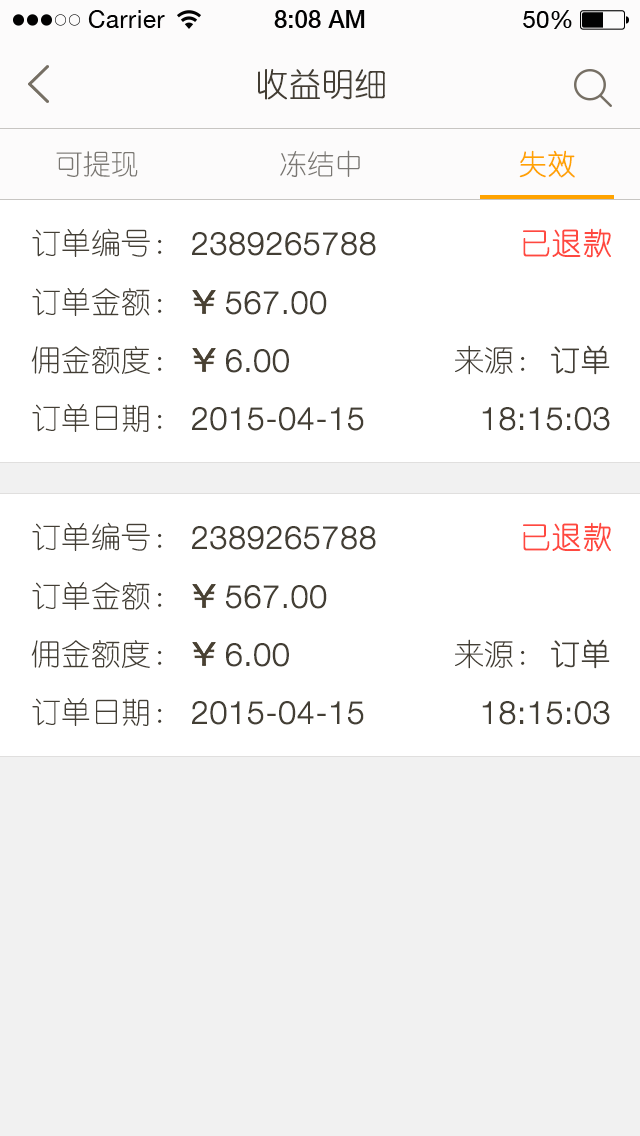
<style>
.page{position:relative;width:640px;height:1136px;background:#ffffff}
.page>*{position:absolute;margin:0}
.t1{font:32px "YouYuan";color:#433d33;text-transform:uppercase;font-weight:bold}
.t2{font:28px "YouYuan";color:#797672;text-transform:uppercase}
.t3{font:28px "YouYuan";color:#ffa300;text-transform:uppercase;font-weight:bold}
.t4{font:28px "YouYuan";color:#7a7772;text-transform:uppercase}
.t5{font:30px "YouYuan";color:#433e34;text-transform:uppercase}
.t6{font:32px "HelveticaNeueLTPro-Lt";color:#433e34;text-transform:uppercase;font-weight:bold}
.t7{font:30px "YouYuan";color:#ff483f;text-transform:uppercase;font-weight:bold}
.t8{font:30px "YouYuan";color:#433e34;text-transform:uppercase;font-weight:bold}
</style>
<div class="page">
<p class="t1" style="left:258px;top:69px;width:127px;height:31px">收益明细</p>
<p class="t2" style="left:280px;top:150px;width:80px;height:27px">冻结中</p>
<p class="t3" style="left:519px;top:150px;width:56px;height:28px">失效</p>
<p class="t4" style="left:56px;top:151px;width:82px;height:26px">可提现</p>
<p class="t5" style="left:32px;top:228px;width:130px;height:29px">订单编号：</p>
<p class="t6" style="left:192px;top:232px;width:184px;height:24px">2389265788</p>
<p class="t7" style="left:523px;top:228px;width:88px;height:30px">已退款</p>
<p class="t5" style="left:32px;top:288px;width:130px;height:28px">订单金额：</p>
<p class="t6" style="left:226px;top:291px;width:101px;height:24px">567.00</p>
<p class="t5" style="left:31px;top:346px;width:131px;height:28px">佣金额度：</p>
<p class="t6" style="left:226px;top:349px;width:63px;height:24px">6.00</p>
<p class="t5" style="left:455px;top:345px;width:70px;height:30px">来源：</p>
<p class="t8" style="left:551px;top:345px;width:59px;height:30px">订单</p>
<p class="t5" style="left:32px;top:404px;width:130px;height:28px">订单日期：</p>
<p class="t6" style="left:192px;top:407px;width:172px;height:24px">2015-04-15</p>
<p class="t6" style="left:482px;top:407px;width:128px;height:24px">18:15:03</p>
<p class="t5" style="left:32px;top:522px;width:130px;height:29px">订单编号：</p>
<p class="t6" style="left:192px;top:526px;width:184px;height:24px">2389265788</p>
<p class="t7" style="left:523px;top:522px;width:88px;height:30px">已退款</p>
<p class="t5" style="left:32px;top:582px;width:130px;height:28px">订单金额：</p>
<p class="t6" style="left:226px;top:585px;width:101px;height:24px">567.00</p>
<p class="t5" style="left:31px;top:640px;width:131px;height:28px">佣金额度：</p>
<p class="t5" style="left:455px;top:639px;width:70px;height:30px">来源：</p>
<p class="t8" style="left:551px;top:639px;width:59px;height:30px">订单</p>
<p class="t6" style="left:226px;top:643px;width:63px;height:24px">6.00</p>
<p class="t5" style="left:32px;top:698px;width:130px;height:28px">订单日期：</p>
<p class="t6" style="left:192px;top:701px;width:172px;height:24px">2015-04-15</p>
<p class="t6" style="left:482px;top:701px;width:128px;height:24px">18:15:03</p>
</div>
